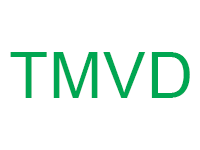
<style>
.page{position:relative;width:200px;height:150px;background:#ffffff}
.page>*{position:absolute;margin:0}
.t1{font:63.5px "ArialMT";letter-spacing:0.02em;color:#00a651}
</style>
<div class="page">
<p class="t1" style="left:10px;top:52px;width:180px;height:46px">TMVD</p>
</div>
